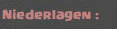
<style>
.page{position:relative;width:117px;height:29px}
.page>*{position:absolute;margin:0}
.t1{font:10px "Supercell-Magic";color:#c38282}
</style>
<div class="page">
<p class="t1" style="left:2px;top:9px;width:97px;height:12px">Niederlagen :</p>
</div>
